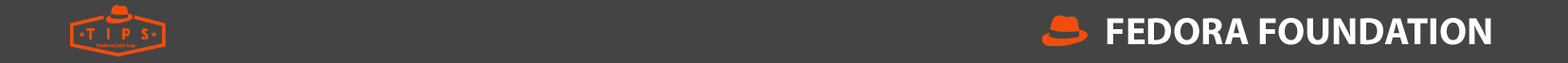
<style>
.page{position:relative;width:1568px;height:63px;background:#444444}
.page>*{position:absolute;margin:0}
.t1{font:38.7px "MyriadPro-Bold";color:#ffffff}
</style>
<div class="page">
<p class="t1" style="left:1107px;top:18px;width:384px;height:27px">FEDORA FOUNDATION</p>
</div>
